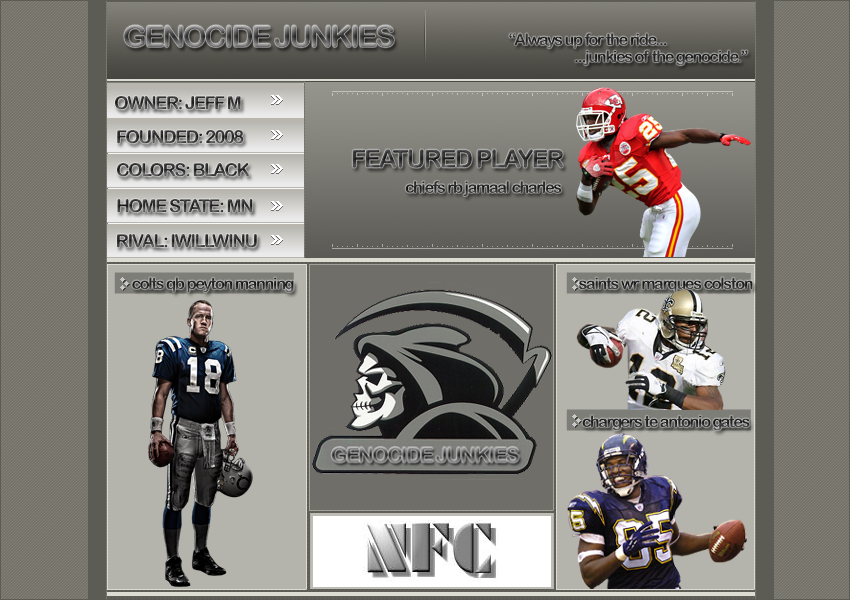
<style>
.page{position:relative;width:850px;height:600px}
.page>*{position:absolute;margin:0}
.t1{font:16px "ArialRoundedMTBold";letter-spacing:-0.075em;color:#2e2e2e}
.t2{font:18px "ArialRoundedMTBold";letter-spacing:-0.075em}
.t3{font:25px "ArialRoundedMTBold";letter-spacing:-0.075em}
.t4{font:16px "ArialRoundedMTBold";letter-spacing:-0.075em;color:#2d2d2d}
.t5{font:16px "ArialRoundedMTBold";letter-spacing:-0.075em;color:#2f2f2f}
</style>
<div class="page">
<p class="t1" style="left:509px;top:33px;width:158px;height:16px">“Always up for the ride...</p>
<p class="t2" style="left:115px;top:96px;width:126px;height:14px">OWNER: JEFF M</p>
<p class="t2" style="left:117px;top:130px;width:127px;height:14px">FOUNDED: 2008</p>
<p class="t3" style="left:352px;top:149px;width:211px;height:19px">FEATURED PLAYER</p>
<p class="t2" style="left:117px;top:163px;width:132px;height:14px">COLORS: BLACK</p>
<p class="t4" style="left:405px;top:181px;width:157px;height:15px">chiefs rb jamaal charles</p>
<p class="t2" style="left:117px;top:199px;width:136px;height:14px">HOME STATE: MN</p>
<p class="t2" style="left:117px;top:234px;width:140px;height:14px">RIVAL: IWILLWINU</p>
<p class="t5" style="left:132px;top:277px;width:162px;height:16px">colts qb peyton manning</p>
<p class="t4" style="left:579px;top:277px;width:174px;height:16px">saints wr marques colston</p>
<p class="t1" style="left:582px;top:415px;width:168px;height:16px">chargers te antonio gates</p>
</div>
